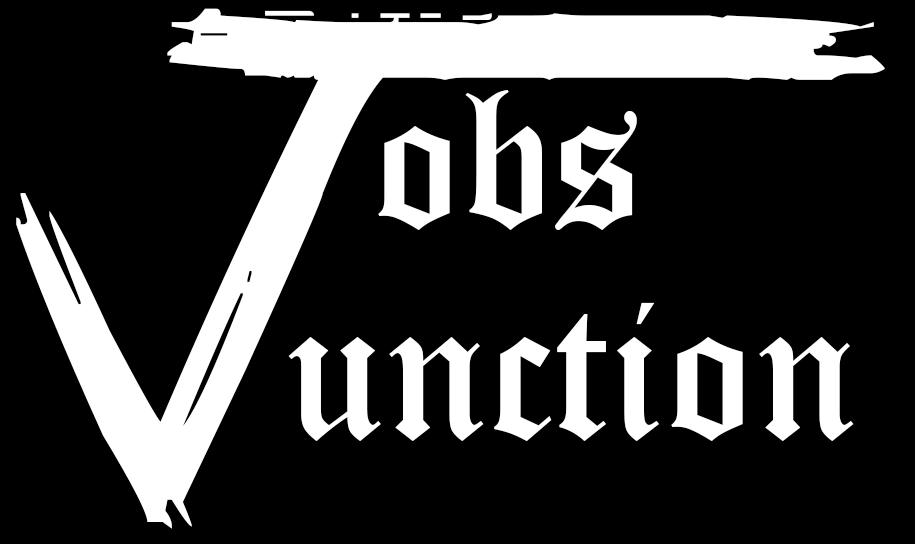
<style>
.page{position:relative;width:915px;height:544px;background:#000000}
.page>*{position:absolute;margin:0}
.t1{font:499.9px "TrueLies";color:#ffffff}
.t2{font:200px "OldEnglishTextMT";color:#ffffff}
</style>
<div class="page">
<p class="t1" style="left:16px;top:8px;width:869px;height:521px">J</p>
<p class="t2" style="left:378px;top:89px;width:259px;height:141px">obs</p>
<p class="t2" style="left:288px;top:302px;width:566px;height:139px">unction</p>
</div>
